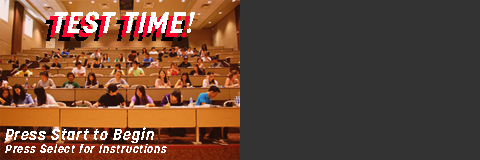
<style>
.page{position:relative;width:480px;height:160px;background:#333333}
.page>*{position:absolute;margin:0}
.t1{font:30px "Korolev-BoldItalic";letter-spacing:0.05em;color:#ff002a}
.t2{font:30px "Korolev-BoldItalic";letter-spacing:0.05em;color:#ffffff}
.t3{font:30px "Korolev-BoldItalic";letter-spacing:0.05em}
.t4{font:16px "Korolev-BoldItalic";letter-spacing:0.05em;color:#ffffff}
.t5{font:12px "Korolev-BoldItalic";letter-spacing:0.05em;color:#ffffff}
</style>
<div class="page">
<p class="t1" style="left:49px;top:15px;width:141px;height:22px">TEST TIME!</p>
<p class="t2" style="left:54px;top:11px;width:141px;height:22px">TEST TIME!</p>
<p class="t3" style="left:45px;top:19px;width:141px;height:22px">TEST TIME!</p>
<p class="t4" style="left:5px;top:127px;width:149px;height:16px">Press Start to Begin</p>
<p class="t5" style="left:5px;top:144px;width:162px;height:9px">Press Select for Instructions</p>
</div>
